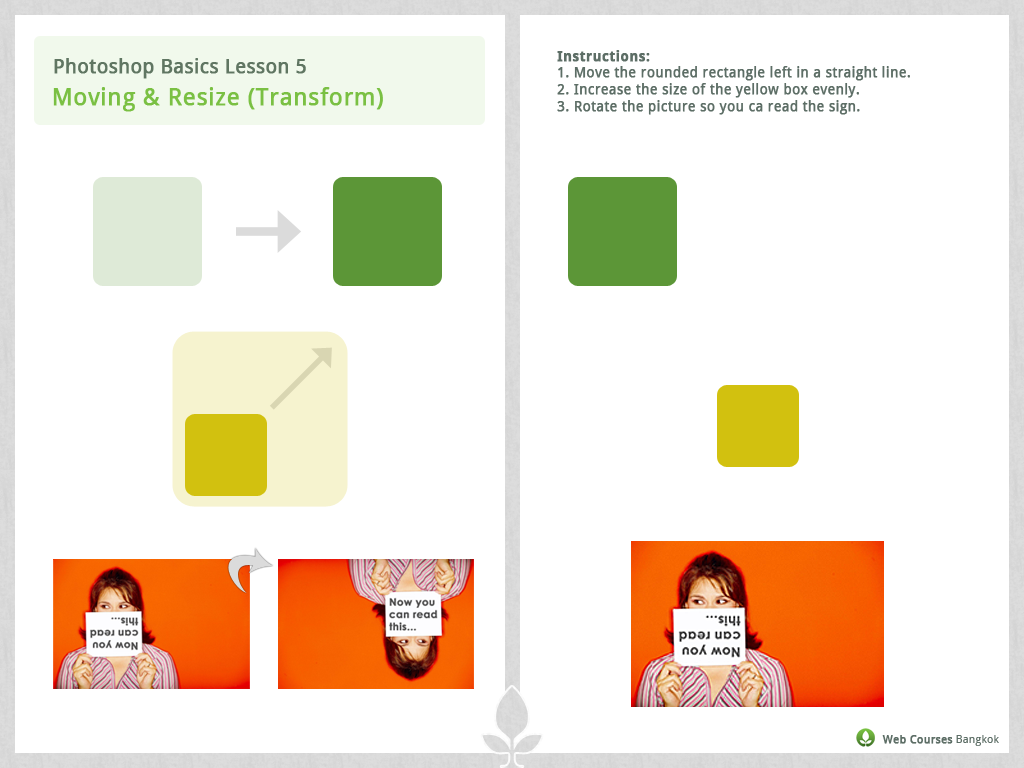
<style>
.page{position:relative;width:1024px;height:768px;background:#ffffff}
.page>*{position:absolute;margin:0}
.t1{font:14px "DroidSans";letter-spacing:0.01em;color:#5d6e66;font-weight:bold}
.t2{font:14px "DroidSans-Bold";letter-spacing:0.01em;color:#5d6e66;font-weight:bold}
.t3{font:19.6px "DroidSans";letter-spacing:0.01em;color:#5d6e66;font-weight:bold}
.t4{font:24px "DroidSans";letter-spacing:0.01em;color:#7ac043;font-weight:bold}
.t5{font:11.1px "DroidSans";letter-spacing:0.01em;color:#5d6e66;font-weight:bold}
.t6{font:11.1px "DroidSans";letter-spacing:0.01em;color:#5d6e66}
</style>
<div class="page">
<p class="t1" style="left:557px;top:50px;width:353px;height:65px"><span class="t2">Instructions:<br></span>1. Move the rounded rectangle left in a straight line.<br>2. Increase the size of the yellow box evenly.<br>3. Rotate the picture so you ca read the sign.</p>
<p class="t3" style="left:54px;top:58px;width:252px;height:21px">Photoshop Basics Lesson 5</p>
<p class="t4" style="left:53px;top:87px;width:330px;height:25px">Moving &amp; Resize (Transform)</p>
<p class="t5" style="left:882px;top:735px;width:117px;height:11px">Web Courses<span class="t6"> Bangkok</span></p>
</div>
